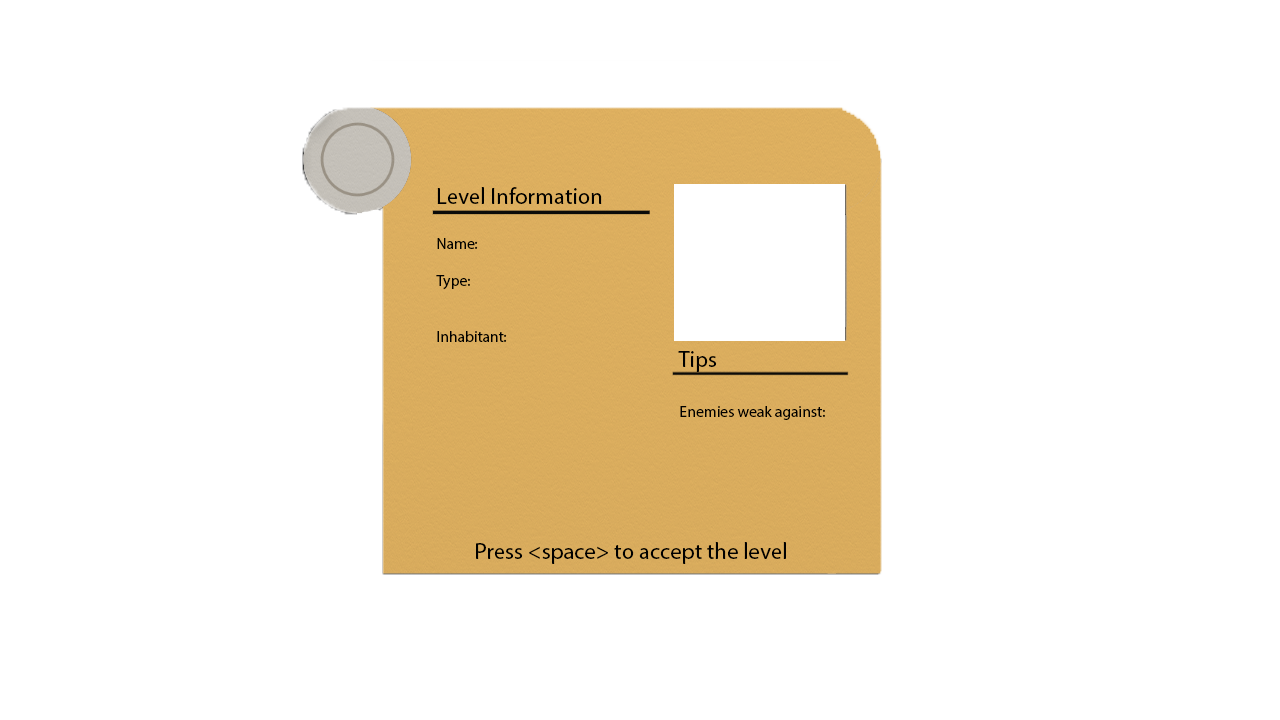
<style>
.page{position:relative;width:1280px;height:720px;background:#ffffff}
.page>*{position:absolute;margin:0}
.t1{font:22.7px "MyriadPro-Regular";color:#000000}
.t2{font:15.6px "MyriadPro-Regular";color:#000000}
</style>
<div class="page">
<p class="t1" style="left:437px;top:187px;width:349px;height:377px">Level Information<br><br><br><br><br><br>           Tips<br><br><br><br><br><br><br>        Press &lt;space&gt; to accept the level</p>
<p class="t2" style="left:436px;top:238px;width:389px;height:182px">Name: <br><br>Type: <br><br><br>Inhabitant:<br><br><br><br>        Enemies weak against:</p>
</div>
